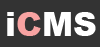
<style>
.page{position:relative;width:100px;height:47px;background:#333333}
.page>*{position:absolute;margin:0}
.t1{font:33px "Arial-Black";color:#ffffff}
.t2{font:33px "Arial-Black";color:#f8a3a2}
</style>
<div class="page">
<p class="t1" style="left:7px;top:12px;width:89px;height:24px">i<span class="t2">C</span>MS</p>
</div>
